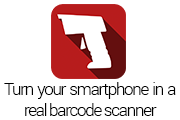
<style>
.page{position:relative;width:180px;height:120px;background:#ffffff}
.page>*{position:absolute;margin:0}
.t1{font:17.3px "Roboto-Light";letter-spacing:-0.08em;color:#000000}
</style>
<div class="page">
<p class="t1" style="left:4px;top:82px;width:172px;height:34px;text-align:justify">Turn your smartphone in a real barcode scanner</p>
</div>
